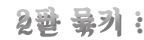
<style>
.page{position:relative;width:144px;height:40px;background:#ffffff}
.page>*{position:absolute;margin:0}
.t1{font:26.9px "SDKukdetopokki-bBd";letter-spacing:0.08em;color:#afacab}
</style>
<div class="page">
<p class="t1" style="left:16px;top:6px;width:125px;height:25px">2판 묶기 :</p>
</div>
